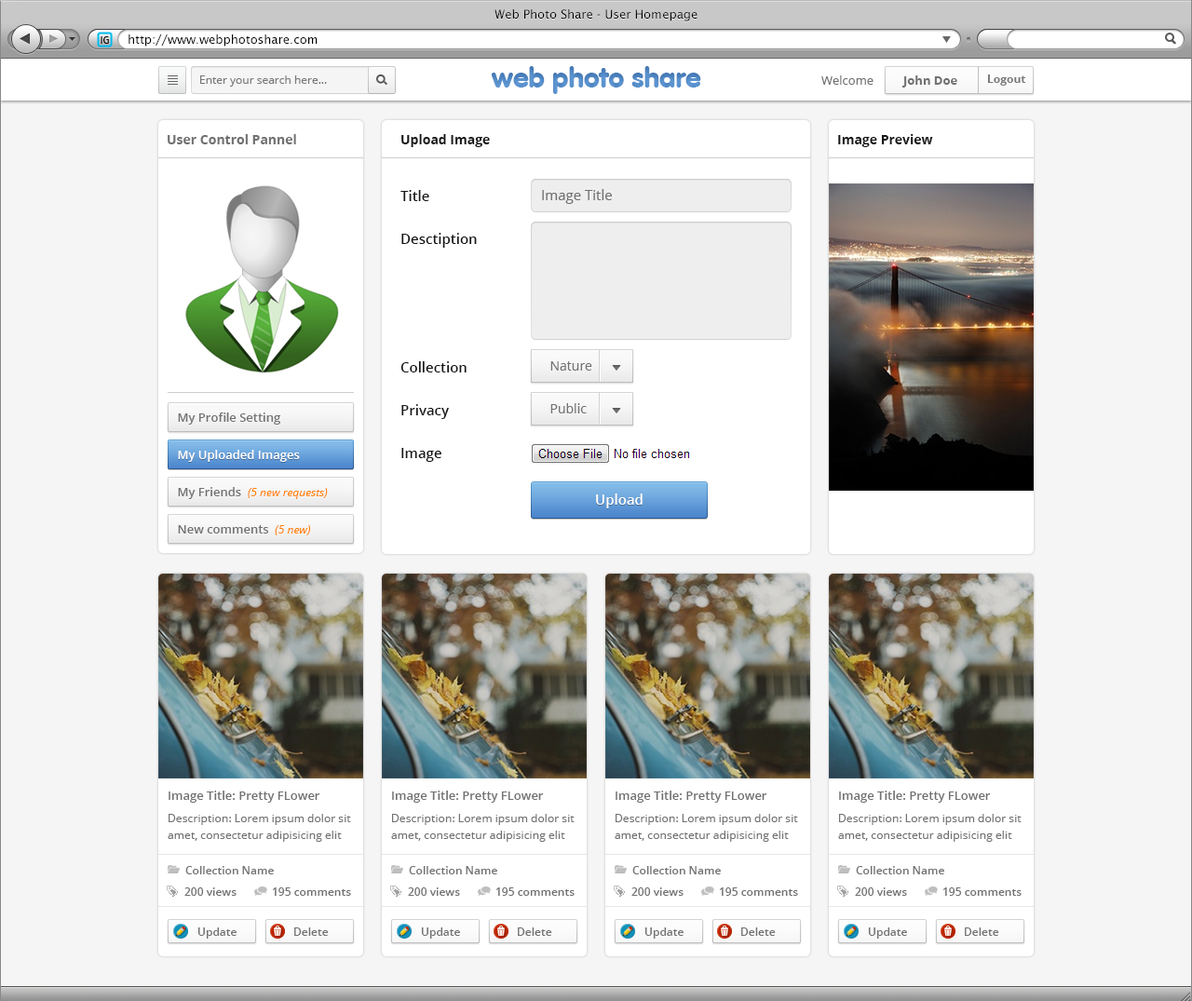
<style>
.page{position:relative;width:1192px;height:1001px;background:#f5f5f5}
.page>*{position:absolute;margin:0}
.t1{font:12.1px "LucidaSans";color:#000000}
.t2{font:11.2px "Dax-Regular";color:#000000}
.t3{font:11.2px "OpenSans";color:#787878}
.t4{font:27.9px "VAGRounded-Black";color:#619bd7}
.t5{font:12.1px "OpenSans";color:#717171}
.t6{font:12.1px "OpenSans-Bold";color:#717171}
.t7{font:11.2px "OpenSans-Bold";color:#787878}
.t8{font:13px "OpenSans-Bold";color:#717171}
.t9{font:13px "OpenSans-Bold";color:#171717}
.t10{font:14px/42.8px "OpenSans-Semibold";color:#171717}
.t11{font:14px "OpenSans";color:#717171}
.t12{font:13px "OpenSans";color:#717171}
.t13{font:12.1px "OpenSans-Semibold";color:#717171}
.t14{font:12.1px "OpenSans-Semibold";color:#fffefe}
.t15{font:11.2px "OpenSans-Italic";color:#ff8100}
.t16{font:14px "OpenSans-Semibold";color:#ffffff}
.t17{font:11.2px/16.8px "OpenSans";color:#717171}
.t18{font:11.2px "OpenSans-Semibold";color:#717171}
</style>
<div class="page">
<p class="t1" style="left:494px;top:9px;width:203px;height:12px">Web Photo Share - User Homepage</p>
<p class="t2" style="left:101px;top:36px;width:8px;height:8px">IG</p>
<p class="t1" style="left:128px;top:34px;width:189px;height:13px">http://www.webphotoshare.com</p>
<p class="t3" style="left:200px;top:75px;width:127px;height:12px">Enter your search here...</p>
<p class="t4" style="left:491px;top:66px;width:210px;height:28px">web photo share</p>
<p class="t5" style="left:821px;top:75px;width:52px;height:10px">Welcome</p>
<p class="t6" style="left:901px;top:75px;width:56px;height:13px">John Doe</p>
<p class="t7" style="left:987px;top:74px;width:39px;height:12px">Logout</p>
<p class="t8" style="left:168px;top:134px;width:128px;height:10px">User Control Pannel</p>
<p class="t9" style="left:401px;top:134px;width:89px;height:13px">Upload Image</p>
<p class="t9" style="left:838px;top:134px;width:95px;height:13px">Image Preview</p>
<p class="t10" style="left:400px;top:190px;width:77px;height:272px">Title<br>Desctiption<br><br><br>Collection<br>Privacy<br>Image</p>
<p class="t11" style="left:542px;top:189px;width:70px;height:15px">Image Title</p>
<p class="t12" style="left:550px;top:361px;width:42px;height:10px">Nature</p>
<p class="t13" style="left:178px;top:412px;width:103px;height:12px">My Profile Setting</p>
<p class="t12" style="left:550px;top:403px;width:36px;height:10px">Public</p>
<p class="t14" style="left:178px;top:450px;width:122px;height:12px">My Uploaded Images</p>
<p class="t15" style="left:178px;top:487px;width:150px;height:12px"><span class="t13">My Friends  </span>(5 new requests)</p>
<p class="t16" style="left:596px;top:493px;width:46px;height:15px">Upload</p>
<p class="t13" style="left:178px;top:525px;width:132px;height:10px">New comments  <span class="t15">(5 new)</span></p>
<p class="t13" style="left:168px;top:790px;width:152px;height:12px">Image Title: Pretty FLower</p>
<p class="t13" style="left:392px;top:790px;width:152px;height:12px">Image Title: Pretty FLower</p>
<p class="t13" style="left:615px;top:790px;width:152px;height:12px">Image Title: Pretty FLower</p>
<p class="t13" style="left:839px;top:790px;width:151px;height:12px">Image Title: Pretty FLower</p>
<p class="t17" style="left:168px;top:814px;width:183px;height:28px">Description: Lorem ipsum dolor sit amet, consectetur adipisicing elit</p>
<p class="t17" style="left:391px;top:814px;width:183px;height:28px">Description: Lorem ipsum dolor sit amet, consectetur adipisicing elit</p>
<p class="t17" style="left:614px;top:814px;width:184px;height:28px">Description: Lorem ipsum dolor sit amet, consectetur adipisicing elit</p>
<p class="t17" style="left:838px;top:814px;width:183px;height:28px">Description: Lorem ipsum dolor sit amet, consectetur adipisicing elit</p>
<p class="t18" style="left:185px;top:866px;width:89px;height:8px">Collection Name</p>
<p class="t18" style="left:409px;top:866px;width:88px;height:8px">Collection Name</p>
<p class="t18" style="left:632px;top:866px;width:89px;height:8px">Collection Name</p>
<p class="t18" style="left:856px;top:866px;width:88px;height:8px">Collection Name</p>
<p class="t18" style="left:184px;top:887px;width:52px;height:9px">200 views</p>
<p class="t18" style="left:273px;top:887px;width:78px;height:9px">195 comments</p>
<p class="t18" style="left:408px;top:887px;width:52px;height:9px">200 views</p>
<p class="t18" style="left:496px;top:887px;width:78px;height:9px">195 comments</p>
<p class="t18" style="left:631px;top:887px;width:52px;height:9px">200 views</p>
<p class="t18" style="left:720px;top:887px;width:78px;height:9px">195 comments</p>
<p class="t18" style="left:855px;top:887px;width:52px;height:9px">200 views</p>
<p class="t18" style="left:943px;top:887px;width:78px;height:9px">195 comments</p>
<p class="t18" style="left:197px;top:927px;width:39px;height:11px">Update</p>
<p class="t18" style="left:294px;top:927px;width:35px;height:9px">Delete</p>
<p class="t18" style="left:421px;top:927px;width:39px;height:11px">Update</p>
<p class="t18" style="left:518px;top:927px;width:34px;height:9px">Delete</p>
<p class="t18" style="left:644px;top:927px;width:39px;height:11px">Update</p>
<p class="t18" style="left:741px;top:927px;width:34px;height:9px">Delete</p>
<p class="t18" style="left:868px;top:927px;width:39px;height:11px">Update</p>
<p class="t18" style="left:964px;top:927px;width:35px;height:9px">Delete</p>
</div>
